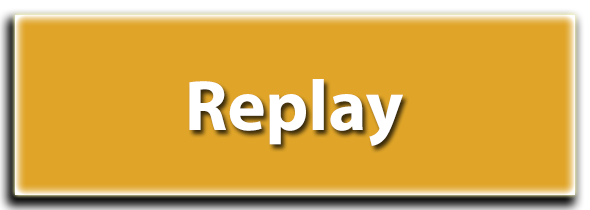
<style>
.page{position:relative;width:590px;height:210px;background:#e0a528}
.page>*{position:absolute;margin:0}
.t1{font:72px "MyriadPro-Bold";color:#ffffff}
</style>
<div class="page">
<p class="t1" style="left:189px;top:79px;width:214px;height:67px">Replay</p>
</div>
